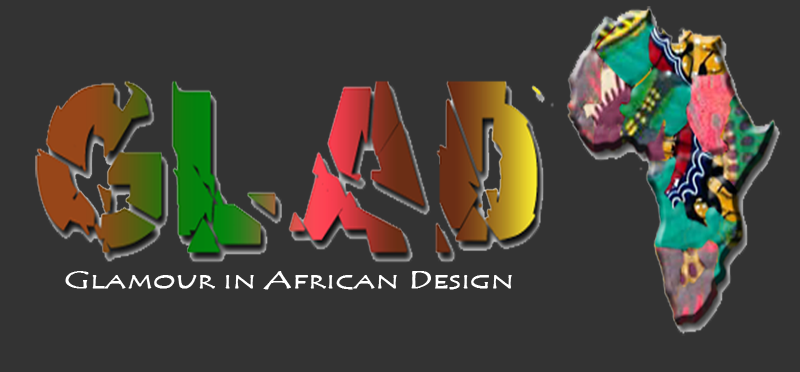
<style>
.page{position:relative;width:800px;height:372px;background:#333333}
.page>*{position:absolute;margin:0}
.t1{font:19px "TempusSansITC";color:#ffffff;font-weight:bold;scale:1.49 1}
.t2{font:24.3px "TempusSansITC";color:#ffffff;font-weight:bold;scale:1.49 1}
</style>
<div class="page">
<p class="t1" style="left:65px;top:271px;width:447px;height:19px"><span class="t2">G</span>LAMOUR IN <span class="t2">A</span>FRICAN <span class="t2">D</span>ESIGN</p>
</div>
